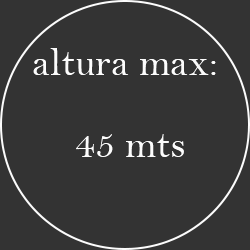
<style>
.page{position:relative;width:250px;height:250px;background:#333333}
.page>*{position:absolute;margin:0}
.t1{font:40px "BellMT";color:#fcfcfc}
</style>
<div class="page">
<p class="t1" style="left:33px;top:48px;width:183px;height:27px">altura max:</p>
<p class="t1" style="left:76px;top:134px;width:108px;height:23px">45 mts</p>
</div>
